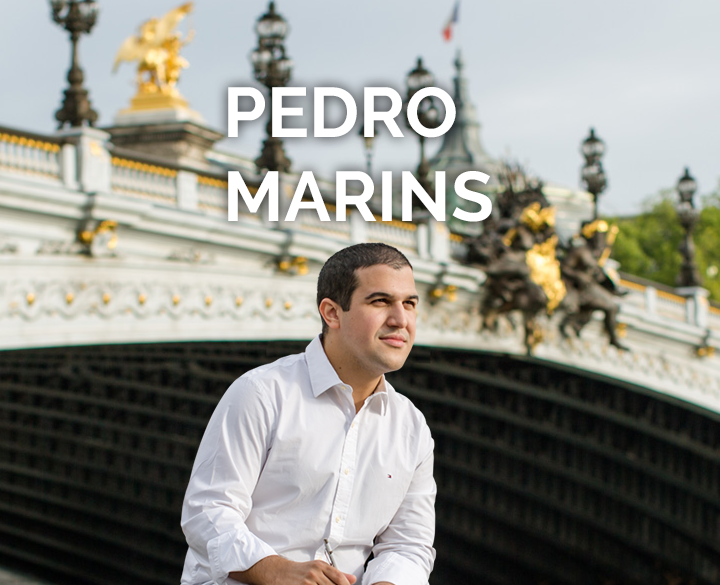
<style>
.page{position:relative;width:720px;height:585px}
.page>*{position:absolute;margin:0}
.t1{font:70px "Raleway-Bold";color:#ffffff}
</style>
<div class="page">
<p class="t1" style="left:228px;top:87px;width:264px;height:135px">PEDRO <br>MARINS</p>
</div>
